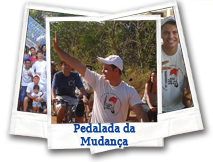
<style>
.page{position:relative;width:213px;height:162px}
.page>*{position:absolute;margin:0}
.t1{font:11px "Georgia";color:#0e4194;font-weight:bold}
</style>
<div class="page">
<p class="t1" style="left:73px;top:123px;width:63px;height:25px;text-align:center">Pedalada da<br>Mudança</p>
</div>
